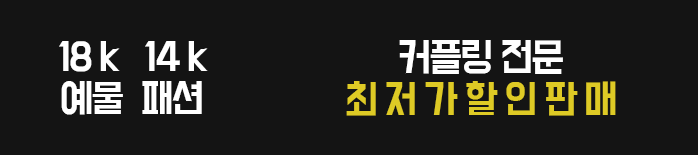
<style>
.page{position:relative;width:698px;height:155px;background:#141414}
.page>*{position:absolute;margin:0}
.t1{font:35px "BMDoHyeon";letter-spacing:-0.07em;color:#ffffff}
.t2{font:35.1px "BMDoHyeon";letter-spacing:-0.07em;color:#deca25}
.t3{font:35.1px "BMDoHyeon";letter-spacing:-0.07em;color:#ffffff}
</style>
<div class="page">
<p class="t1" style="left:59px;top:41px;width:149px;height:74px;text-align:center">18 k   14 k<br>예물  패션</p>
<p class="t2" style="left:346px;top:40px;width:270px;height:76px;text-align:center"><span class="t3">커플링 전문<br></span>최 저 가 할 인 판 매</p>
</div>
